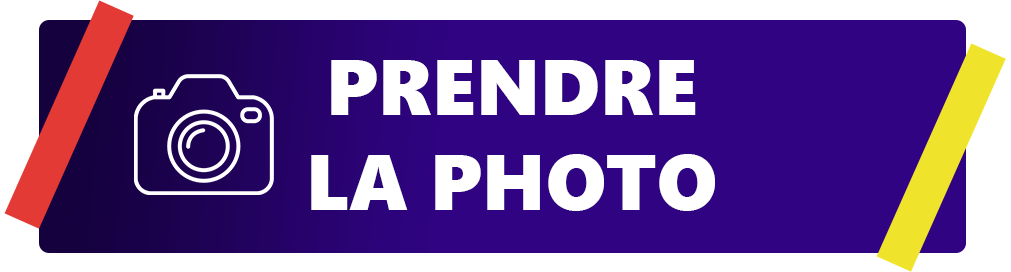
<style>
.page{position:relative;width:1011px;height:272px;background:#300383}
.page>*{position:absolute;margin:0}
.t1{font:79.1px "SegoeUIBlack";color:#ffffff;text-transform:uppercase}
</style>
<div class="page">
<p class="t1" style="left:311px;top:60px;width:404px;height:151px;text-align:center">PRENDRE<br>LA PHOTO</p>
</div>
